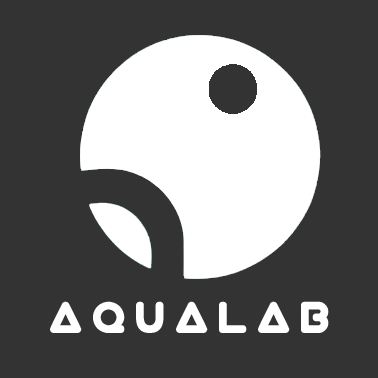
<style>
.page{position:relative;width:378px;height:378px;background:#333333}
.page>*{position:absolute;margin:0}
.t1{font:40px "Virgo01";letter-spacing:0.2em;color:#ffffff}
</style>
<div class="page">
<p class="t1" style="left:50px;top:301px;width:279px;height:32px">AquaLab</p>
</div>
